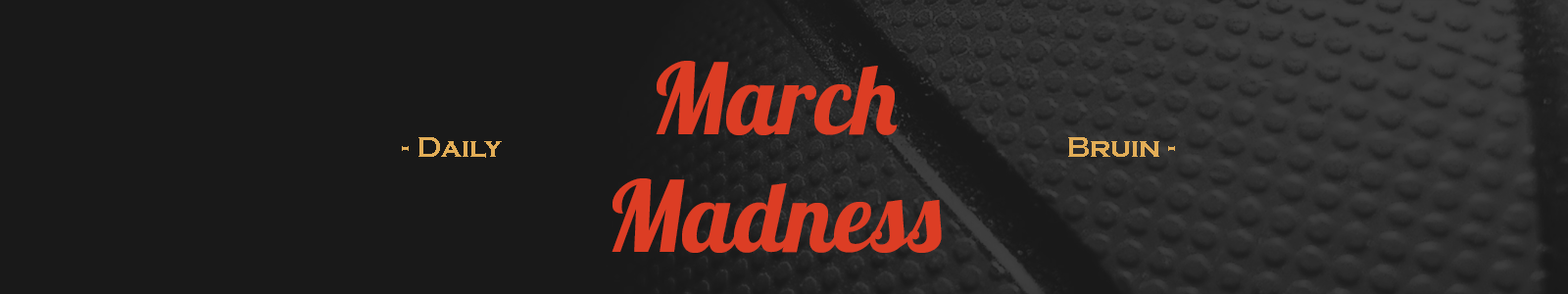
<style>
.page{position:relative;width:1568px;height:294px;background:#191919}
.page>*{position:absolute;margin:0}
.t1{font:98.1px "Lobster1.4";color:#dc3d24}
.t2{font:29.4px "CopperplateGothic-Bold";color:#e3ae57}
</style>
<div class="page">
<p class="t1" style="left:612px;top:61px;width:330px;height:192px;text-align:center">March<br>Madness</p>
<p class="t2" style="left:402px;top:137px;width:100px;height:21px">- Daily</p>
<p class="t2" style="left:1068px;top:137px;width:107px;height:20px">Bruin -</p>
</div>
